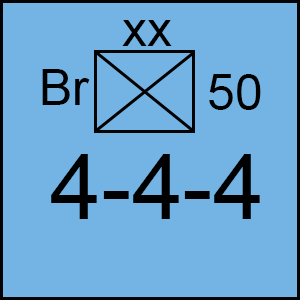
<style>
.page{position:relative;width:300px;height:300px;background:#74b4e4}
.page>*{position:absolute;margin:0}
.t1{font:50px "ArialMT";color:#000000}
.t2{font:91.7px "ArialMT";color:#000000}
</style>
<div class="page">
<p class="t1" style="left:122px;top:20px;width:50px;height:26px">xx</p>
<p class="t1" style="left:42px;top:69px;width:48px;height:36px">Br</p>
<p class="t1" style="left:209px;top:74px;width:52px;height:36px">50</p>
<p class="t2" style="left:51px;top:154px;width:209px;height:65px">4-4-4</p>
</div>
